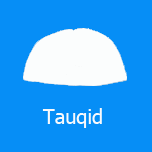
<style>
.page{position:relative;width:152px;height:152px;background:#068ef6}
.page>*{position:absolute;margin:0}
.t1{font:20px "Tahoma";color:#f8f9fc}
</style>
<div class="page">
<p class="t1" style="left:42px;top:108px;width:60px;height:20px">Tauqid</p>
</div>
